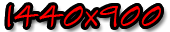
<style>
.page{position:relative;width:170px;height:32px;background:#000000}
.page>*{position:absolute;margin:0}
.t1{font:33.3px "SketchFlowPrint";color:#ff0000}
</style>
<div class="page">
<p class="t1" style="left:7px;top:5px;width:154px;height:22px">1440x900</p>
<p class="t1" style="left:7px;top:5px;width:154px;height:22px">1440x900</p>
</div>
